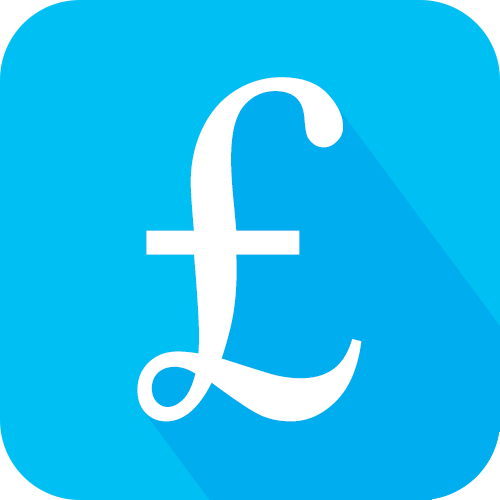
<style>
.page{position:relative;width:500px;height:500px;background:#00bff3}
.page>*{position:absolute;margin:0}
.t1{font:500px "TimesNewRomanPSMT";color:#ffffff}
</style>
<div class="page">
<p class="t1" style="left:137px;top:77px;width:225px;height:345px">£</p>
</div>
